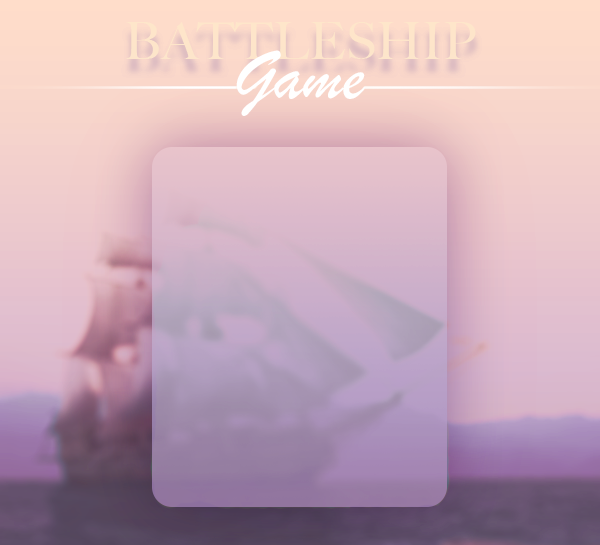
<style>
.page{position:relative;width:600px;height:545px}
.page>*{position:absolute;margin:0}
.t1{font:51.1px "BigCaslon-Medium";color:#fee5ca;text-transform:uppercase}
.t2{font:71.6px "BrushScriptMT";color:#ffffff}
.t3{font:71.6px "BrushScriptMT";color:#ffffff;text-transform:uppercase}
</style>
<div class="page">
<p class="t1" style="left:126px;top:22px;width:350px;height:37px">battleship</p>
<p class="t1" style="left:126px;top:22px;width:350px;height:37px">battleship</p>
<p class="t2" style="left:236px;top:50px;width:129px;height:66px"><span class="t3">g</span>ame</p>
</div>
